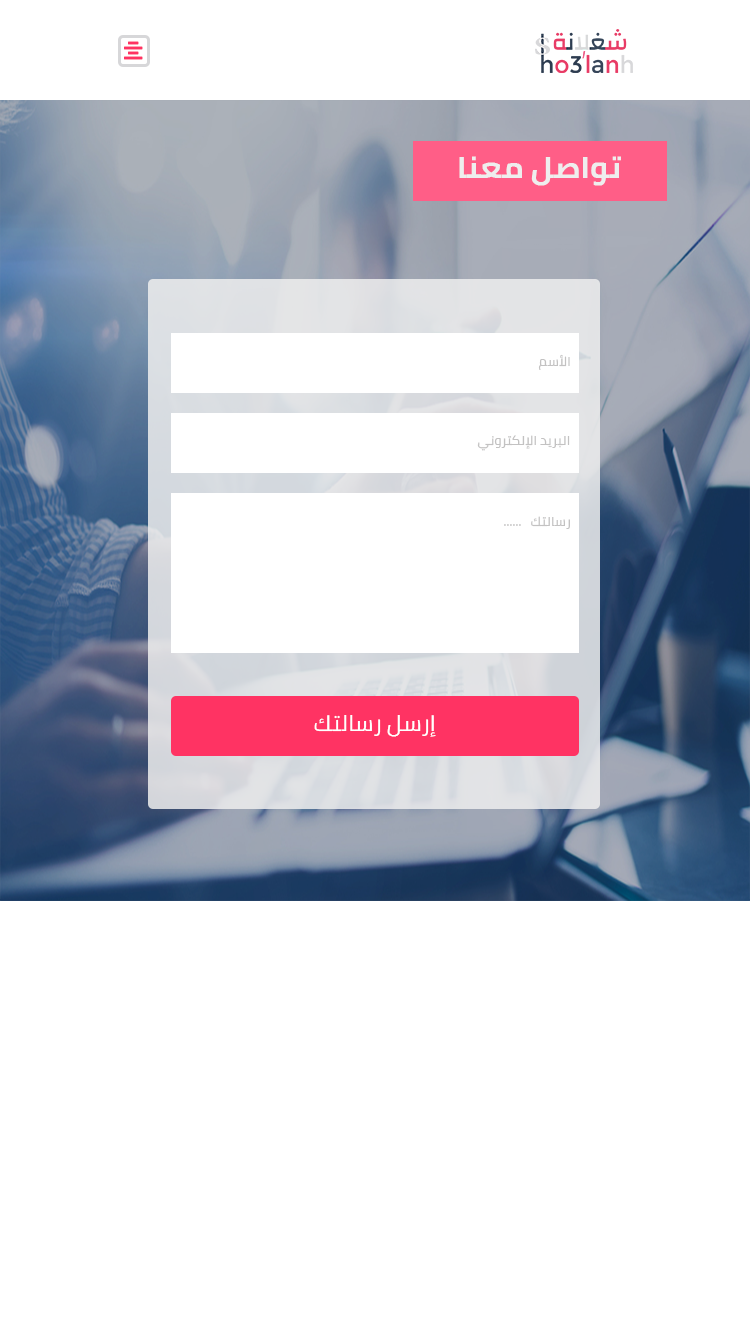
<style>
.page{position:relative;width:750px;height:1334px;background:#ffffff}
.page>*{position:absolute;margin:0}
.t1{font:30px "Cairo-Bold";color:#eeeeee;text-transform:uppercase;scale:1.06 1}
.t2{font:13px "Cairo";color:#c3c2c2;text-transform:uppercase;scale:1.06 1}
.t3{font:13px "Cairo";color:#c3c2c2;scale:1.06 1}
.t4{font:22px "Cairo";color:#ffffff;text-transform:uppercase;scale:1.06 1}
</style>
<div class="page">
<p class="t1" style="left:459px;top:156px;width:162px;height:30px">تواصل معنا</p>
<p class="t2" style="left:538px;top:354px;width:32px;height:16px">الأسم</p>
<p class="t2" style="left:477px;top:435px;width:93px;height:16px">البريد الإلكتروني</p>
<p class="t3" style="left:504px;top:516px;width:66px;height:13px">......   رسالتك</p>
<p class="t4" style="left:314px;top:715px;width:122px;height:22px">إرسل رسالتك</p>
</div>
